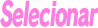
<style>
.page{position:relative;width:98px;height:28px;background:#ffffff}
.page>*{position:absolute;margin:0}
.t1{font:32px "RodinPro-EB";letter-spacing:-0.051em;color:#f980de;font-style:italic;scale:0.6 1}
</style>
<div class="page">
<p class="t1" style="left:0px;top:0px;width:98px;height:27px">Selecionar</p>
</div>
